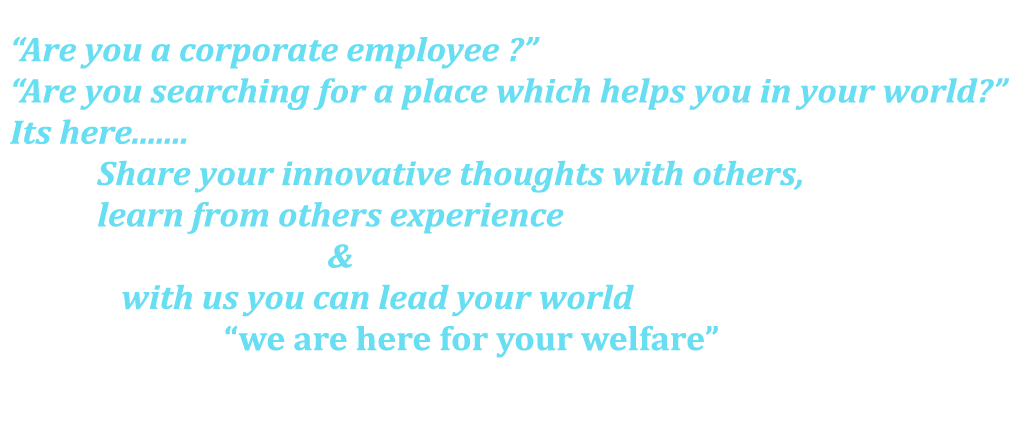
<style>
.page{position:relative;width:1024px;height:430px;background:#ffffff}
.page>*{position:absolute;margin:0}
.t1{font:34.4px "Cambria-BoldItalic";color:#68def3;scale:1.05 1}
.t2{font:34.4px "Cambria-Bold";color:#68def3;scale:1.05 1}
</style>
<div class="page">
<p class="t1" style="left:10px;top:36px;width:999px;height:322px">“Are you a corporate employee ?”<br>“Are you searching for a place which helps you in your world?”<br>Its here.......<br>           Share your innovative thoughts with others,<br>           learn from others experience <br>                                        &amp;<br>              with us you can lead your world<br>                           <span class="t2">“we are here for your welfare”</span></p>
</div>
